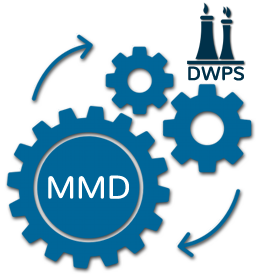
<style>
.page{position:relative;width:258px;height:275px;background:#ffffff}
.page>*{position:absolute;margin:0}
.t1{font:18.8px "Nunito-Regular";color:#01324a;font-weight:bold}
.t2{font:32.9px "Nunito-Regular";color:#ffffff}
</style>
<div class="page">
<p class="t1" style="left:188px;top:66px;width:56px;height:15px">DWPS</p>
<p class="t2" style="left:48px;top:175px;width:81px;height:24px">MMD</p>
</div>
